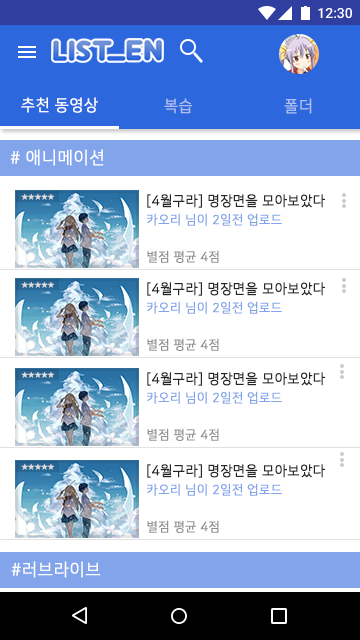
<style>
.page{position:relative;width:360px;height:640px;background:#ffffff}
.page>*{position:absolute;margin:0}
.t1{font:16px "NanumSquareR";letter-spacing:0.02em;color:#ffffff;font-weight:bold;scale:0.96 1}
.t2{font:16px "NanumSquareR";letter-spacing:0.02em;color:#acbdee;font-weight:bold;scale:0.95 1}
.t3{font:16px "NanumSquareR";letter-spacing:0.02em;color:#acbdee;font-weight:bold;scale:0.96 1}
.t4{font:17.3px "NanumSquareR";letter-spacing:0.02em;color:#ffffff;font-weight:bold;scale:0.96 1}
.t5{font:6.6px "NanumSquareR";letter-spacing:0.1em;color:#dedede}
.t6{font:13.9px "NanumSquareR";letter-spacing:0.02em;color:#262626;font-weight:bold;scale:0.95 1}
.t7{font:12.9px/120px "NanumSquareR";letter-spacing:0.02em;color:#81a4eb;font-weight:bold;scale:0.95 1}
.t8{font:12.9px/120px "NanumSquareR";letter-spacing:0.02em;color:#909090;font-weight:bold;scale:0.95 1}
</style>
<div class="page">
<p class="t1" style="left:21px;top:97px;width:77px;height:16px">추천 동영상</p>
<p class="t2" style="left:164px;top:98px;width:28px;height:16px">복습</p>
<p class="t3" style="left:284px;top:98px;width:28px;height:16px">폴더</p>
<p class="t4" style="left:10px;top:149px;width:94px;height:17px"># 애니메이션</p>
<p class="t5" style="left:21px;top:193px;width:34px;height:7px">★★★★★</p>
<p class="t6" style="left:147px;top:194px;width:178px;height:14px">[4월구라] 명장면을 모아보았다</p>
<p class="t7" style="left:147px;top:213px;width:135px;height:13px">카오리 님이 2일전 업로드<br><span class="t8">2</span></p>
<p class="t8" style="left:147px;top:250px;width:72px;height:13px">별점 평균 4점<br>2</p>
<p class="t5" style="left:21px;top:281px;width:34px;height:7px">★★★★★</p>
<p class="t6" style="left:147px;top:282px;width:178px;height:14px">[4월구라] 명장면을 모아보았다</p>
<p class="t7" style="left:147px;top:301px;width:135px;height:13px">카오리 님이 2일전 업로드<br><span class="t8">2</span></p>
<p class="t8" style="left:147px;top:338px;width:72px;height:13px">별점 평균 4점<br>2</p>
<p class="t5" style="left:21px;top:371px;width:34px;height:7px">★★★★★</p>
<p class="t6" style="left:147px;top:372px;width:178px;height:14px">[4월구라] 명장면을 모아보았다</p>
<p class="t7" style="left:147px;top:391px;width:135px;height:13px">카오리 님이 2일전 업로드<br><span class="t8">2</span></p>
<p class="t8" style="left:147px;top:428px;width:72px;height:13px">별점 평균 4점<br>2</p>
<p class="t5" style="left:21px;top:463px;width:34px;height:7px">★★★★★</p>
<p class="t6" style="left:147px;top:464px;width:178px;height:14px">[4월구라] 명장면을 모아보았다</p>
<p class="t7" style="left:147px;top:483px;width:135px;height:13px">카오리 님이 2일전 업로드<br><span class="t8">2</span></p>
<p class="t8" style="left:147px;top:520px;width:72px;height:13px">별점 평균 4점<br>2</p>
<p class="t4" style="left:11px;top:561px;width:90px;height:17px">#러브라이브</p>
</div>
